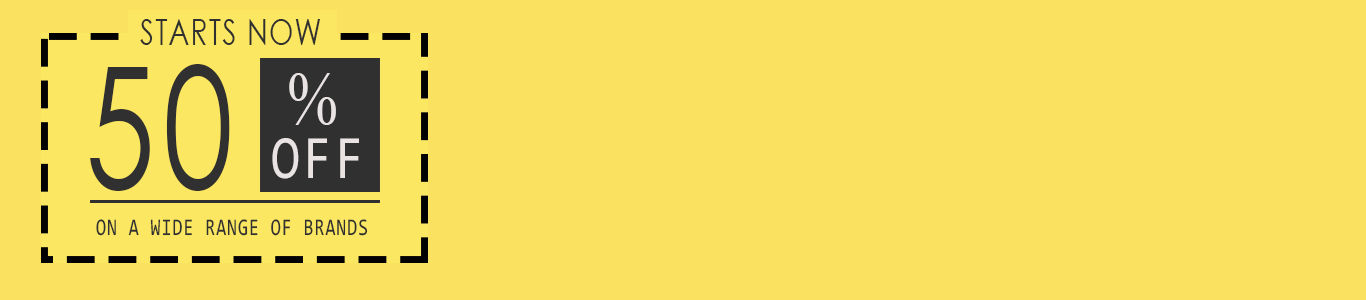
<style>
.page{position:relative;width:1366px;height:300px;background:#fae260}
.page>*{position:absolute;margin:0}
.t1{font:36px "CenturyGothic";letter-spacing:0.06em;color:#313030;scale:0.76 1}
.t2{font:168.1px "CenturyGothic";letter-spacing:0.06em;color:#313030;scale:0.75 1}
.t3{font:76.2px "CenturySchoolbook";letter-spacing:0.06em;color:#eae3e3;scale:0.84 1}
.t4{font:61.9px "Consolas";letter-spacing:0.06em;color:#eae3e3;scale:0.84 1}
.t5{font:24.1px "Consolas";letter-spacing:0.06em;color:#313030;scale:0.74 1}
</style>
<div class="page">
<p class="t1" style="left:140px;top:19px;width:180px;height:26px">STARTS NOW</p>
<p class="t2" style="left:90px;top:64px;width:140px;height:127px">50</p>
<p class="t3" style="left:289px;top:73px;width:47px;height:52px">%</p>
<p class="t4" style="left:272px;top:138px;width:87px;height:41px">OFF</p>
<p class="t5" style="left:96px;top:219px;width:272px;height:17px">ON A WIDE RANGE OF BRANDS</p>
</div>
